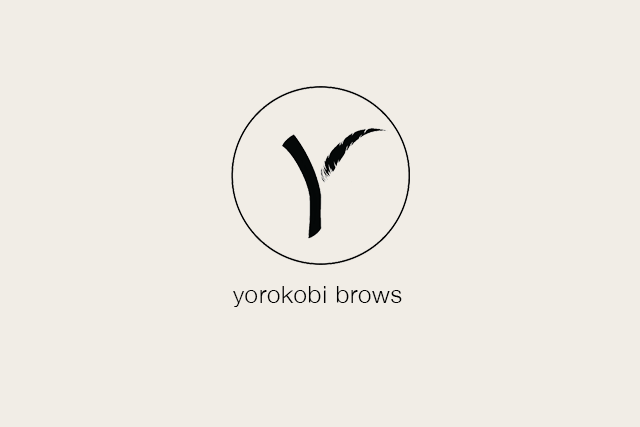
<style>
.page{position:relative;width:640px;height:427px;background:#f1ede6}
.page>*{position:absolute;margin:0}
.t1{font:24px "HelveticaNeue-Light";letter-spacing:0.04em;color:#000000}
</style>
<div class="page">
<p class="t1" style="left:233px;top:286px;width:169px;height:21px">yorokobi brows</p>
</div>
